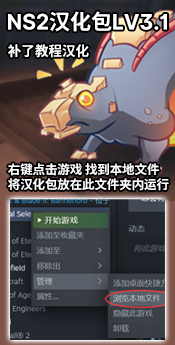
<style>
.page{position:relative;width:175px;height:345px}
.page>*{position:absolute;margin:0}
.t1{font:21px "Sarasa-Gothic-SC-Bold";color:#ffffff}
.t2{font:13.5px "Sarasa-Gothic-SC-Bold";color:#ffffff}
.t3{font:12.4px "Sarasa-Gothic-SC-Bold";color:#ffffff}
</style>
<div class="page">
<p class="t1" style="left:8px;top:11px;width:159px;height:21px">NS2汉化包LV3.1</p>
<p class="t2" style="left:8px;top:44px;width:81px;height:14px">补了教程汉化</p>
<p class="t3" style="left:8px;top:163px;width:161px;height:28px">右键点击游戏 找到本地文件<br>将汉化包放在此文件夹内运行</p>
</div>
